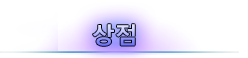
<style>
.page{position:relative;width:248px;height:58px;background:#ffffff}
.page>*{position:absolute;margin:0}
.t1{font:23px "MalgunGothicBold"}
</style>
<div class="page">
<p class="t1" style="left:93px;top:24px;width:42px;height:22px">상점</p>
</div>
